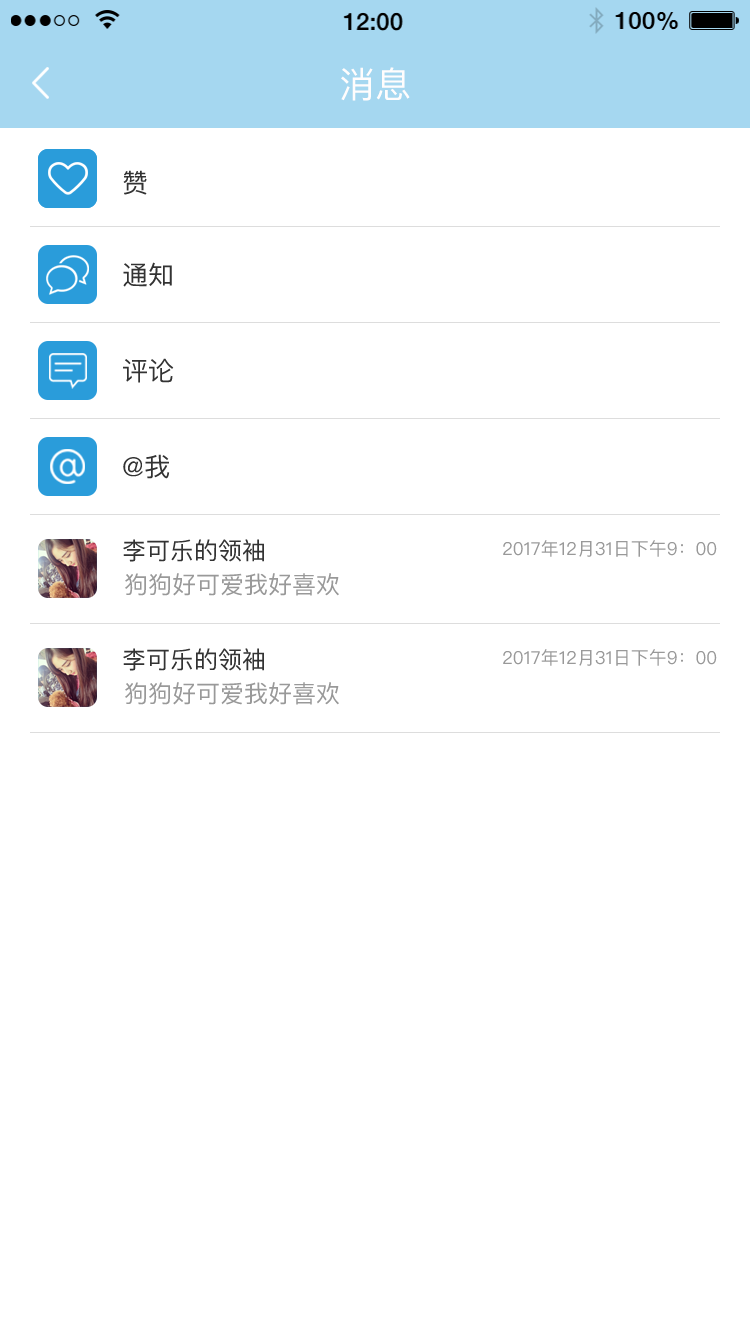
<style>
.page{position:relative;width:750px;height:1334px;background:#ffffff}
.page>*{position:absolute;margin:0}
.t1{font:36px "PingFangSC-Regular";color:#fffdfd}
.t2{font:26px "PingFangSC";color:#333333}
.t3{font:24px "PingFangSC";color:#333333}
.t4{font:18px "PingFangSC";color:#999999}
.t5{font:24px "PingFangSC";color:#999999}
</style>
<div class="page">
<p class="t1" style="left:341px;top:67px;width:69px;height:34px">消息</p>
<p class="t2" style="left:123px;top:170px;width:24px;height:25px">赞</p>
<p class="t2" style="left:123px;top:262px;width:49px;height:25px">通知</p>
<p class="t2" style="left:123px;top:358px;width:51px;height:25px">评论</p>
<p class="t2" style="left:123px;top:454px;width:47px;height:25px">@我</p>
<p class="t3" style="left:123px;top:539px;width:141px;height:23px">李可乐的领袖</p>
<p class="t4" style="left:503px;top:540px;width:214px;height:17px">2017年12月31日下午9：00</p>
<p class="t5" style="left:125px;top:573px;width:214px;height:23px">狗狗好可爱我好喜欢</p>
<p class="t3" style="left:123px;top:648px;width:141px;height:23px">李可乐的领袖</p>
<p class="t4" style="left:503px;top:649px;width:214px;height:17px">2017年12月31日下午9：00</p>
<p class="t5" style="left:125px;top:682px;width:214px;height:23px">狗狗好可爱我好喜欢</p>
</div>
